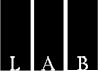
<style>
.page{position:relative;width:98px;height:71px;background:#000000}
.page>*{position:absolute;margin:0}
.t1{font:20.3px "Vollkorn-Regular";color:#ffffff}
</style>
<div class="page">
<p class="t1" style="left:10px;top:56px;width:10px;height:15px">L</p>
<p class="t1" style="left:41px;top:56px;width:14px;height:15px">A</p>
<p class="t1" style="left:77px;top:56px;width:11px;height:15px">B</p>
</div>
